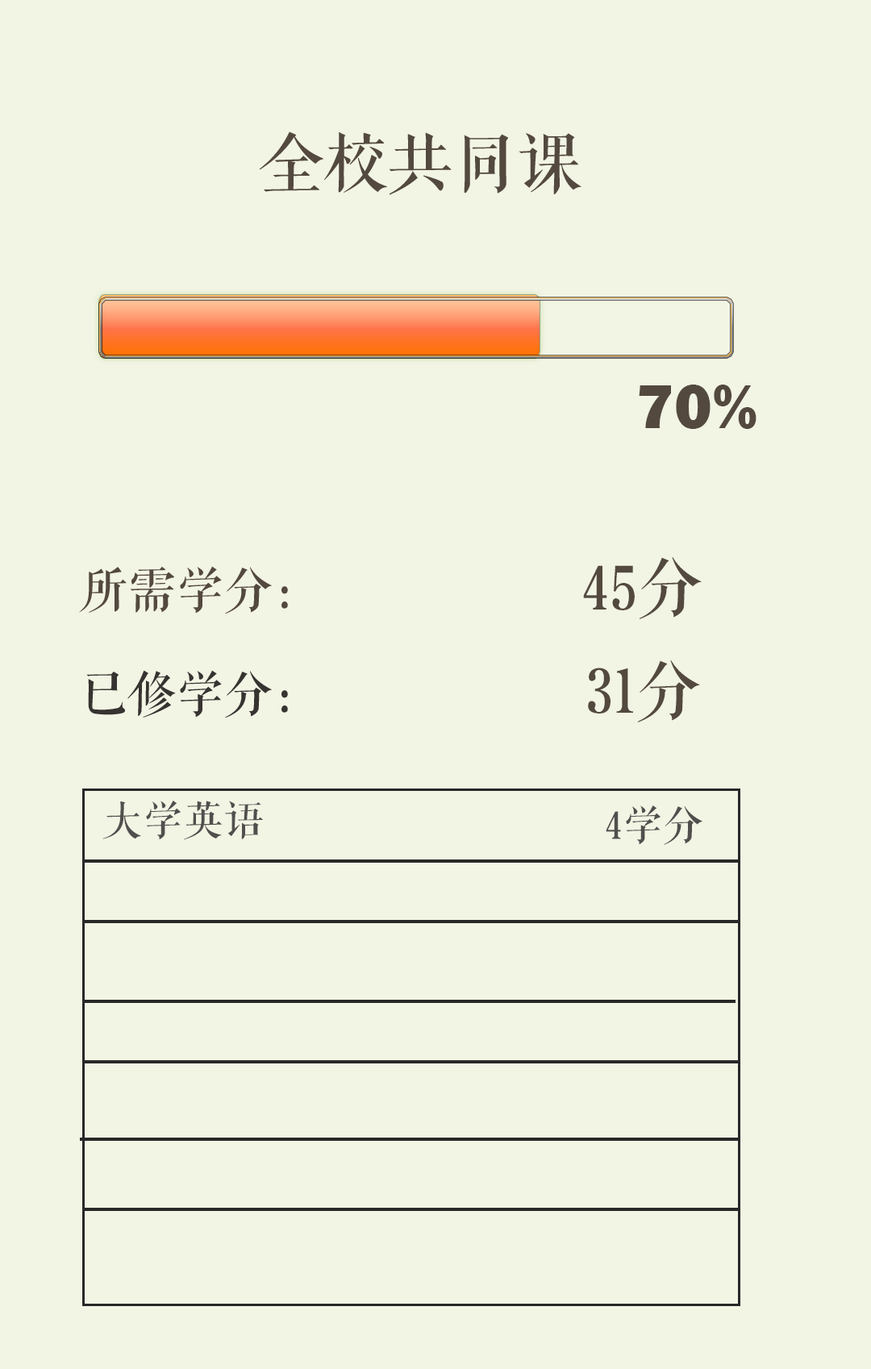
<style>
.page{position:relative;width:871px;height:1369px;background:#f2f4e4}
.page>*{position:absolute;margin:0}
.t1{font:64.5px "FranklinGothic-Heavy";color:#53493e}
.t2{font:64.5px "FZQKBYSJW--GB1-0";color:#53493e}
.t3{font:40.3px "FZQKBYSJW--GB1-0";color:#514f4d}
</style>
<div class="page">
<p class="t1" style="left:639px;top:385px;width:117px;height:44px">70%</p>
<p class="t2" style="left:583px;top:556px;width:119px;height:63px">45分</p>
<p class="t2" style="left:588px;top:660px;width:112px;height:63px">31分</p>
<p class="t3" style="left:102px;top:801px;width:161px;height:39px">大学英语</p>
<p class="t3" style="left:606px;top:806px;width:96px;height:39px">4学分</p>
</div>
